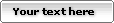
<style>
.page{position:relative;width:114px;height:23px;background:#ffffff}
.page>*{position:absolute;margin:0}
.t1{font:10px "Verdana-Bold";color:#000000}
</style>
<div class="page">
<p class="t1" style="left:13px;top:7px;width:81px;height:8px">Your text here</p>
</div>
